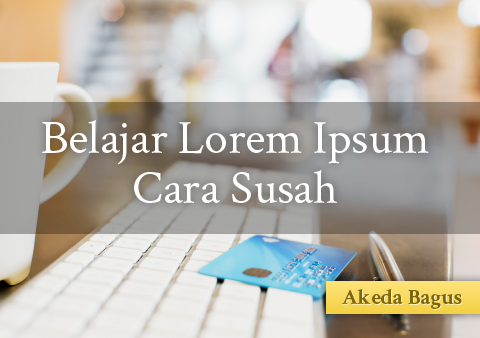
<style>
.page{position:relative;width:480px;height:338px}
.page>*{position:absolute;margin:0}
.t1{font:48px/50px "Crimson-Roman";letter-spacing:-0.005em;color:#fffefe}
.t2{font:22px "Crimson-Bold";letter-spacing:-0.005em;color:#7d660c}
.t3{font:22px "Crimson-Bold";letter-spacing:-0.005em}
</style>
<div class="page">
<p class="t1" style="left:42px;top:120px;width:387px;height:83px;text-align:center">Belajar Lorem Ipsum<br>Cara Susah</p>
<p class="t2" style="left:342px;top:289px;width:120px;height:20px">Akeda Bagus</p>
<p class="t3" style="left:343px;top:290px;width:120px;height:20px">Akeda Bagus</p>
</div>
